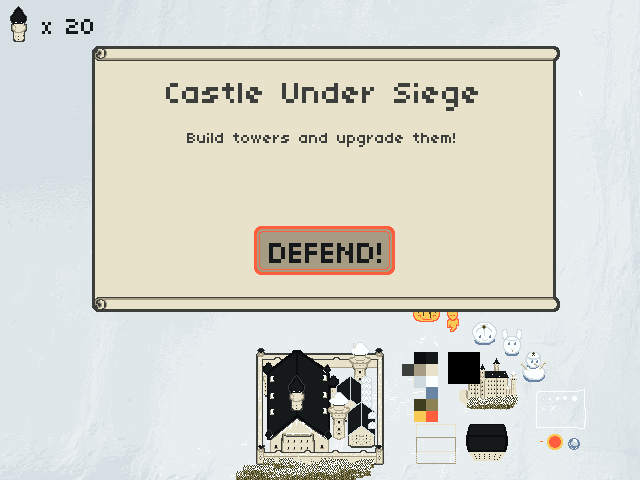
<style>
.page{position:relative;width:640px;height:480px;background:#e8e2ca}
.page>*{position:absolute;margin:0}
.t1{font:24px "04b03";color:#15191a}
.t2{font:32px "04b03";color:#3c3e3b}
.t3{font:16px "04b03";color:#3c3e3b}
.t4{font:32px "04b03";color:#15191a}
</style>
<div class="page">
<p class="t1" style="left:42px;top:19px;width:51px;height:15px">x 20</p>
<p class="t2" style="left:166px;top:83px;width:312px;height:28px">Castle Under Siege</p>
<p class="t3" style="left:187px;top:133px;width:268px;height:14px">Build towers and upgrade them!</p>
<p class="t4" style="left:269px;top:240px;width:112px;height:20px">DEFEND!</p>
<p class="t4" style="left:269px;top:243px;width:112px;height:20px">DEFEND!</p>
</div>
